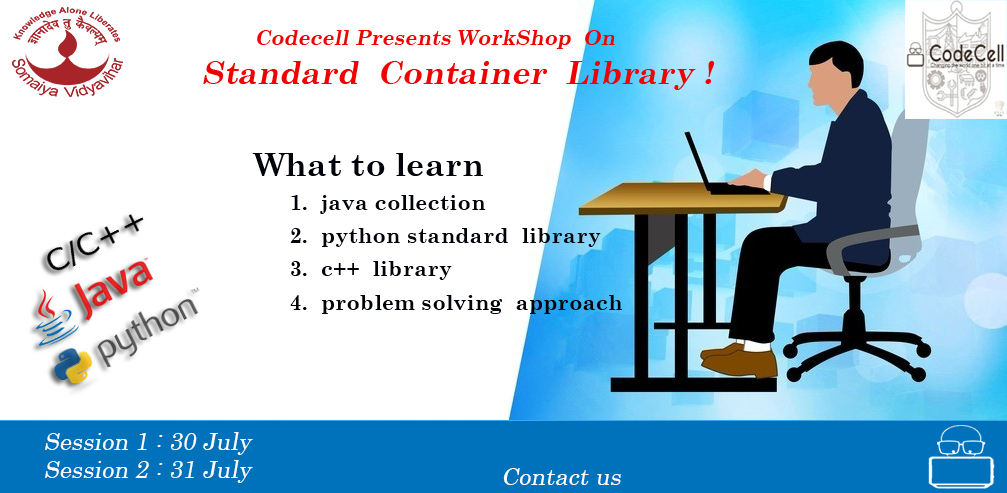
<style>
.page{position:relative;width:1007px;height:493px;background:#ffffff}
.page>*{position:absolute;margin:0}
.t1{font:21.3px/33.3px "CenturySchoolbook-Bold";letter-spacing:0.01em;color:#01030a}
.t2{font:32px/33.3px "CenturySchoolbook-Bold";letter-spacing:0.01em;color:#01030a}
.t3{font:24px "Century";letter-spacing:0.003em;color:#ffffff;font-style:italic}
</style>
<div class="page">
<p class="t1" style="left:252px;top:153px;width:370px;height:161px"><span class="t2">What to learn <br> </span>1.  java collection <br> 2.  python standard  library<br> 3.  c++  library<br> 4.  problem solving  approach</p>
<p class="t3" style="left:45px;top:432px;width:208px;height:51px">Session 1 : 30 July<br>Session 2 : 31 July</p>
<p class="t3" style="left:503px;top:468px;width:118px;height:17px">Contact us</p>
</div>
